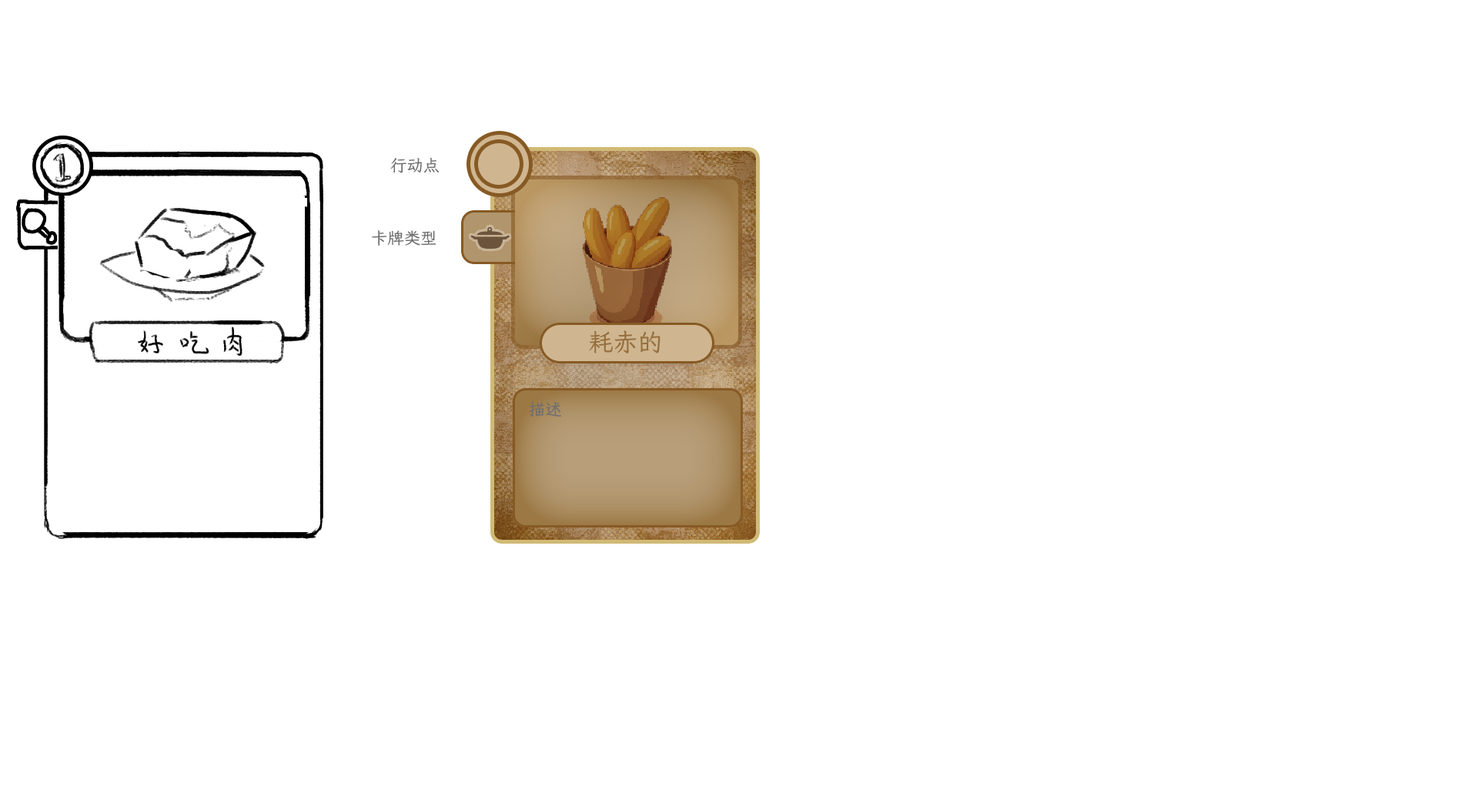
<style>
.page{position:relative;width:1478px;height:807px;background:#ffffff}
.page>*{position:absolute;margin:0}
.t1{font:16.4px "LXGWWenKai-Regular";color:#6e6e6e}
.t2{font:24.6px "LXGWWenKai-Regular";color:#966f3d}
</style>
<div class="page">
<p class="t1" style="left:390px;top:158px;width:50px;height:15px">行动点</p>
<p class="t1" style="left:372px;top:230px;width:64px;height:16px">卡牌类型</p>
<p class="t2" style="left:589px;top:330px;width:72px;height:23px">耗赤的</p>
<p class="t1" style="left:529px;top:402px;width:33px;height:14px">描述</p>
</div>
